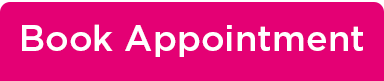
<style>
.page{position:relative;width:384px;height:81px;background:#e40074}
.page>*{position:absolute;margin:0}
.t1{font:36px "Gotham-Medium";color:#ffffff}
</style>
<div class="page">
<p class="t1" style="left:22px;top:24px;width:341px;height:33px">Book Appointment</p>
</div>
